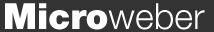
<style>
.page{position:relative;width:214px;height:32px;background:#333333}
.page>*{position:absolute;margin:0}
.t1{font:36px "HelveticaNeue-Black";color:#f1f0f0}
.t2{font:36px "HelveticaNeue-Light";color:#f1f0f0}
</style>
<div class="page">
<p class="t1" style="left:5px;top:3px;width:200px;height:27px">Micro<span class="t2">weber</span></p>
</div>
